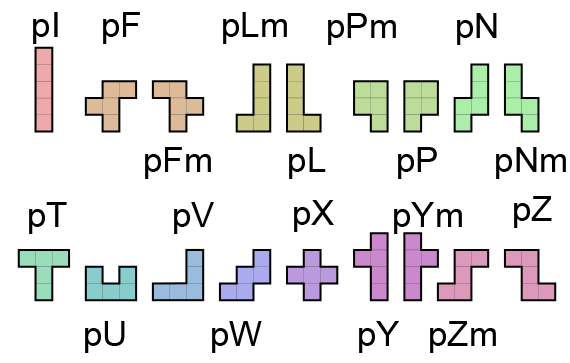
<style>
.page{position:relative;width:570px;height:363px;background:#ffffff}
.page>*{position:absolute;margin:0}
.t1{font:35px "ArialMT";color:#000000}
</style>
<div class="page">
<p class="t1" style="left:33px;top:12px;width:25px;height:32px">pI</p>
<p class="t1" style="left:103px;top:12px;width:37px;height:32px">pF</p>
<p class="t1" style="left:223px;top:12px;width:64px;height:32px">pLm</p>
<p class="t1" style="left:328px;top:13px;width:68px;height:32px">pPm</p>
<p class="t1" style="left:457px;top:13px;width:40px;height:32px">pN</p>
<p class="t1" style="left:145px;top:147px;width:66px;height:32px">pFm</p>
<p class="t1" style="left:289px;top:147px;width:37px;height:32px">pL</p>
<p class="t1" style="left:398px;top:147px;width:39px;height:32px">pP</p>
<p class="t1" style="left:496px;top:147px;width:70px;height:32px">pNm</p>
<p class="t1" style="left:514px;top:196px;width:38px;height:32px">pZ</p>
<p class="t1" style="left:29px;top:202px;width:38px;height:32px">pT</p>
<p class="t1" style="left:174px;top:202px;width:40px;height:32px">pV</p>
<p class="t1" style="left:294px;top:200px;width:40px;height:32px">pX</p>
<p class="t1" style="left:394px;top:202px;width:68px;height:32px">pYm</p>
<p class="t1" style="left:85px;top:321px;width:40px;height:32px">pU</p>
<p class="t1" style="left:212px;top:321px;width:50px;height:32px">pW</p>
<p class="t1" style="left:359px;top:321px;width:40px;height:32px">pY</p>
<p class="t1" style="left:430px;top:321px;width:66px;height:32px">pZm</p>
</div>
